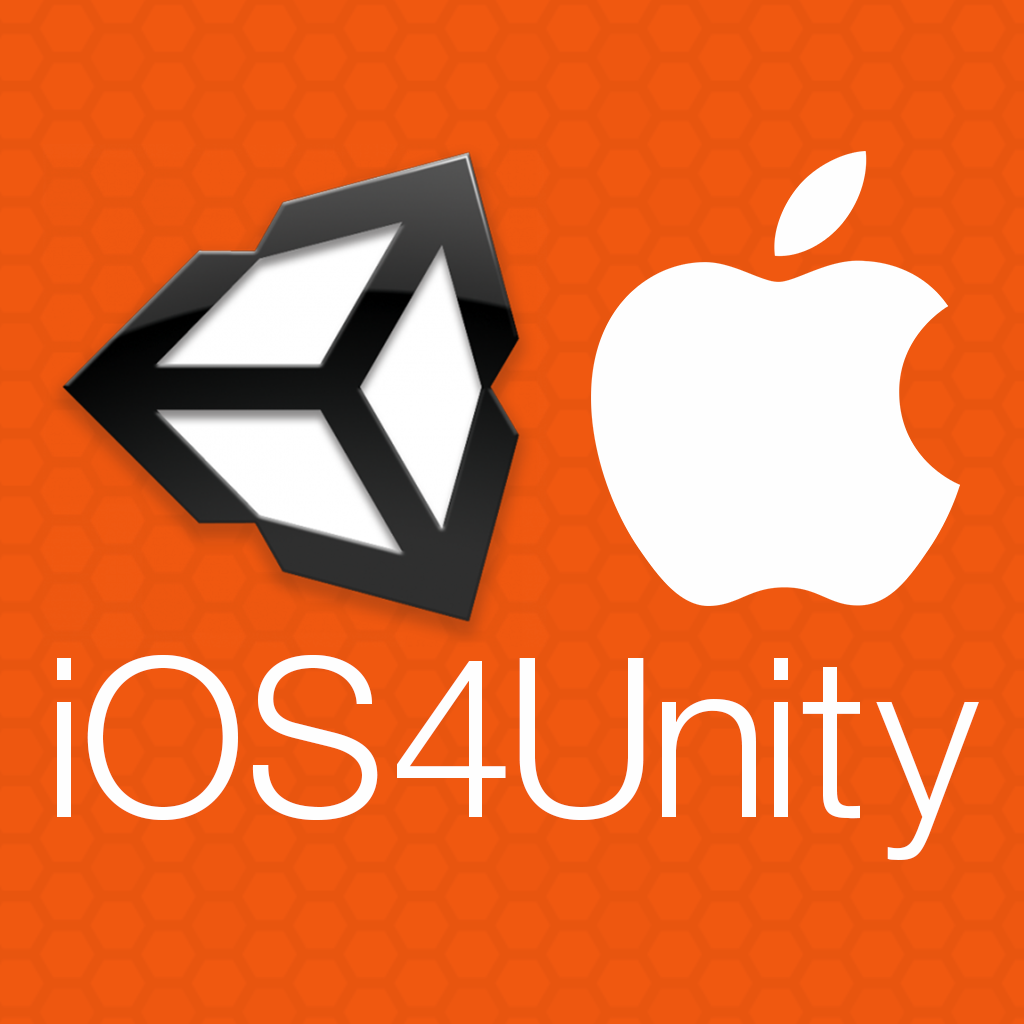
<style>
.page{position:relative;width:1024px;height:1024px;background:#f05810}
.page>*{position:absolute;margin:0}
.t1{font:223.1px "HelveticaNeueLTPro-Lt";color:#fefefe}
</style>
<div class="page">
<p class="t1" style="left:57px;top:654px;width:922px;height:206px">iOS4Unity</p>
</div>
